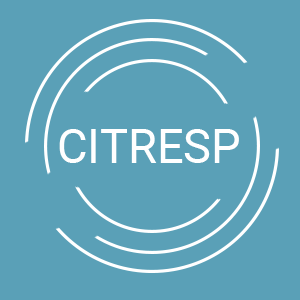
<style>
.page{position:relative;width:300px;height:300px;background:#5aa0b7}
.page>*{position:absolute;margin:0}
.t1{font:46.8px "Roboto-Regular";color:#ffffff;text-transform:uppercase}
</style>
<div class="page">
<p class="t1" style="left:59px;top:129px;width:180px;height:34px">CITRESP</p>
</div>
